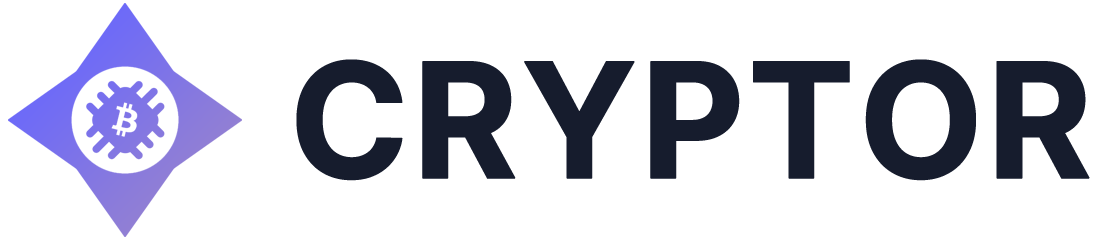
<style>
.page{position:relative;width:1100px;height:240px;background:#ffffff}
.page>*{position:absolute;margin:0}
.t1{font:160px "Inter-Bold";letter-spacing:-0.005em;color:#161c2d;font-weight:bold}
</style>
<div class="page">
<p class="t1" style="left:296px;top:59px;width:794px;height:122px">CRYPTOR</p>
</div>
